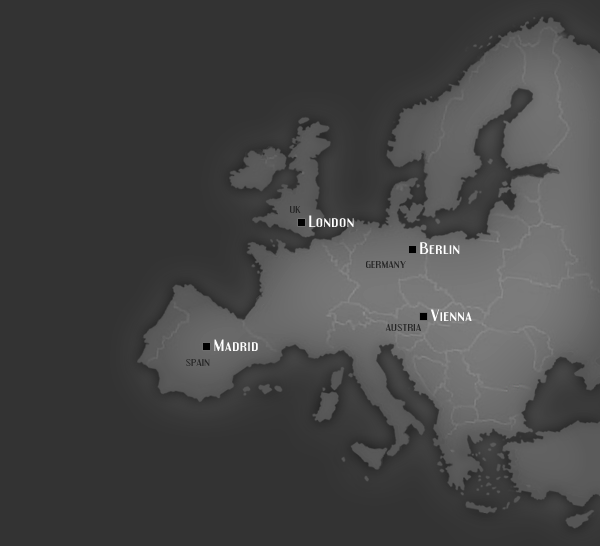
<style>
.page{position:relative;width:600px;height:546px;background:#333333}
.page>*{position:absolute;margin:0}
.t1{font:8.8px "Engebrechtre";letter-spacing:0.05em;color:#262626;scale:1.25 1}
.t2{font:14.4px "Engebrechtre";letter-spacing:0.05em;color:#ffffff;scale:1.25 1}
</style>
<div class="page">
<p class="t1" style="left:290px;top:206px;width:11px;height:7px">UK</p>
<p class="t2" style="left:309px;top:215px;width:45px;height:12px">London</p>
<p class="t2" style="left:420px;top:242px;width:40px;height:12px">Berlin</p>
<p class="t1" style="left:366px;top:261px;width:40px;height:7px">GERMANY</p>
<p class="t2" style="left:430px;top:309px;width:42px;height:12px">Vienna</p>
<p class="t1" style="left:385px;top:324px;width:36px;height:7px">AUSTRIA</p>
<p class="t2" style="left:214px;top:339px;width:44px;height:12px">Madrid</p>
<p class="t1" style="left:186px;top:359px;width:24px;height:7px">SPAIN</p>
</div>
